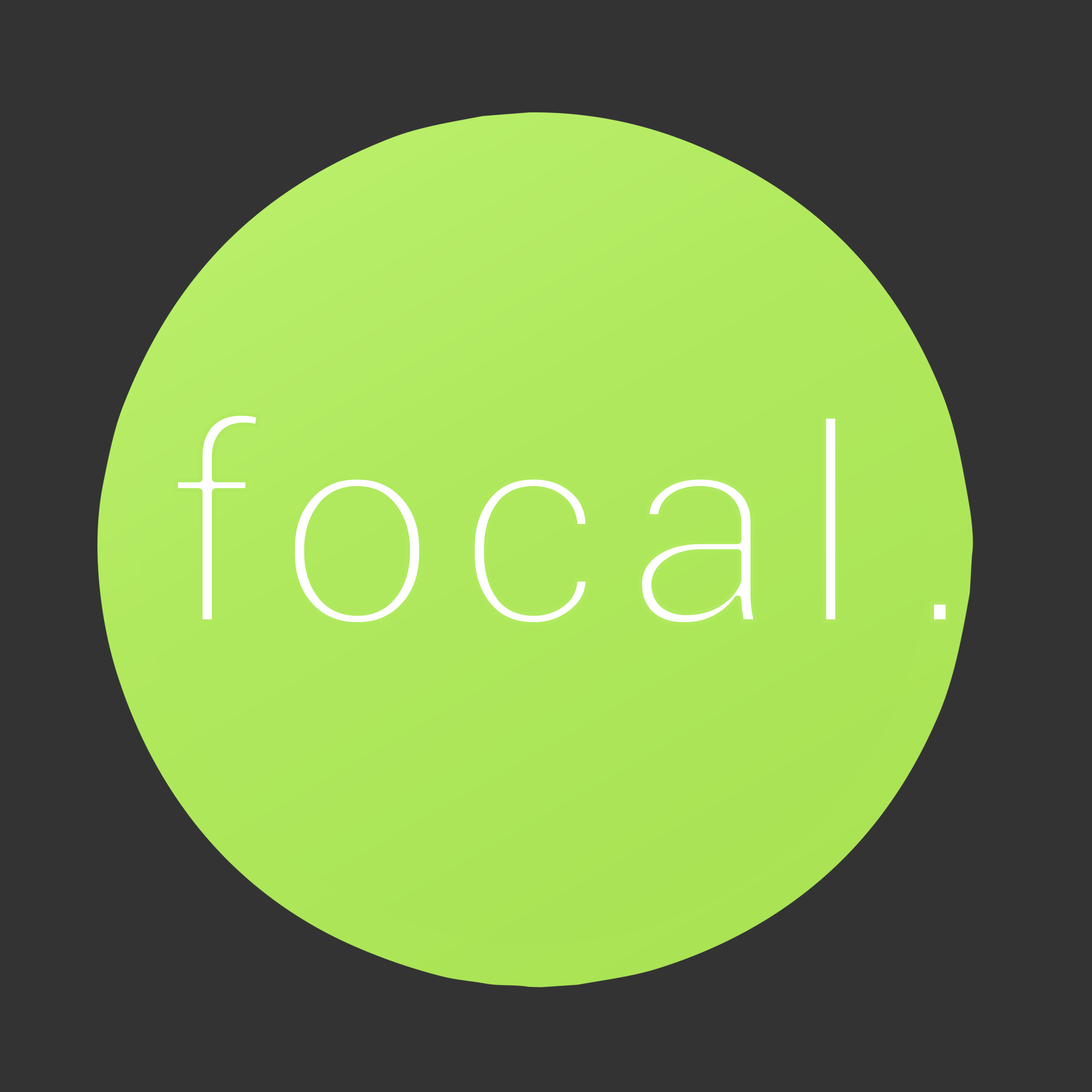
<style>
.page{position:relative;width:1092px;height:1092px;background:#333333}
.page>*{position:absolute;margin:0}
.t1{font:273px "Roboto-Light";letter-spacing:0.08em;scale:1.03 1}
</style>
<div class="page">
<p class="t1" style="left:174px;top:412px;width:775px;height:214px">.focal</p>
</div>
